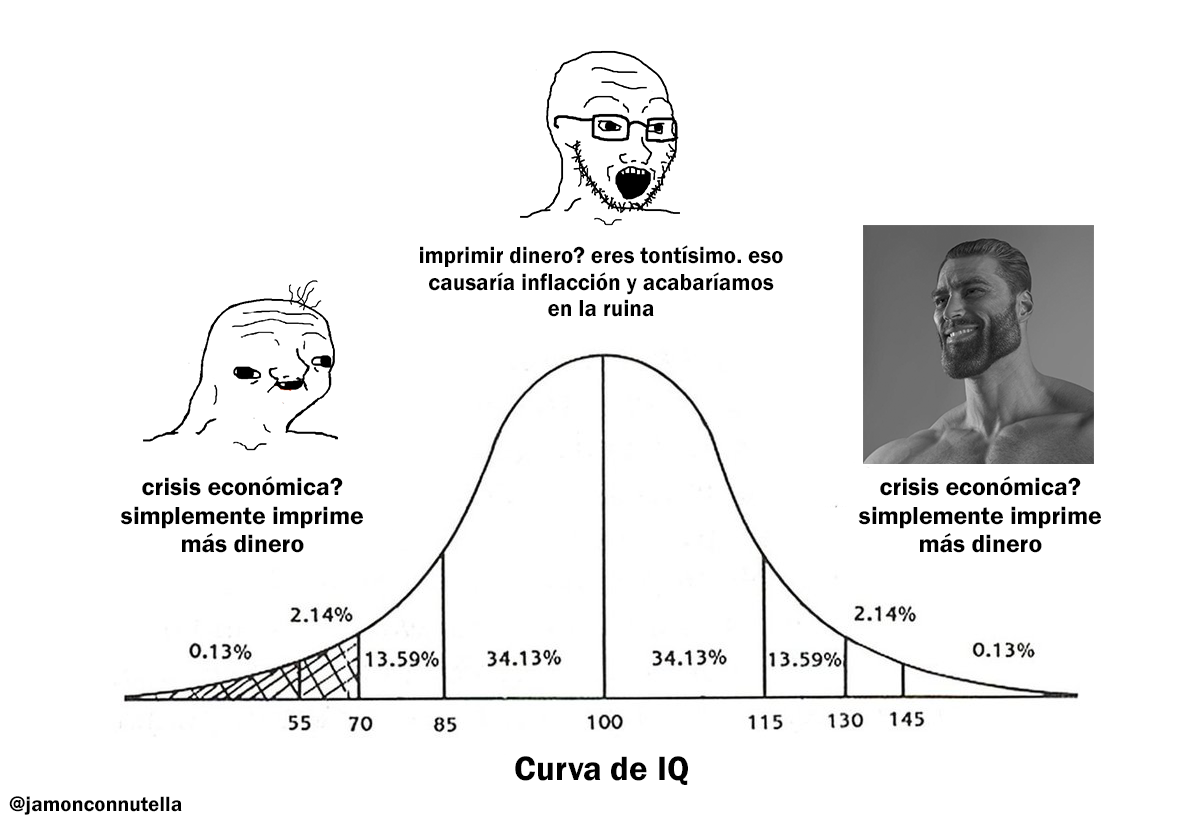
<style>
.page{position:relative;width:1200px;height:821px;background:#ffffff}
.page>*{position:absolute;margin:0}
.t1{font:23.9px "FranklinGothic-Demi";color:#000000;scale:0.97 1}
.t2{font:25.5px "FranklinGothic-Demi";color:#000000}
.t3{font:34.9px "FranklinGothic-Demi";color:#000000}
.t4{font:21.3px "FranklinGothic-Demi";color:#000000}
</style>
<div class="page">
<p class="t1" style="left:420px;top:245px;width:363px;height:72px;text-align:center">imprimir dinero? eres tontísimo. eso<br>causaría inflacción y acabaríamos<br>en la ruina</p>
<p class="t2" style="left:120px;top:476px;width:243px;height:77px;text-align:center">crisis económica?<br>simplemente imprime<br>más dinero</p>
<p class="t2" style="left:858px;top:476px;width:243px;height:77px;text-align:center">crisis económica?<br>simplemente imprime<br>más dinero</p>
<p class="t3" style="left:515px;top:756px;width:173px;height:29px">Curva de IQ</p>
<p class="t4" style="left:9px;top:796px;width:173px;height:19px">@jamonconnutella</p>
</div>
